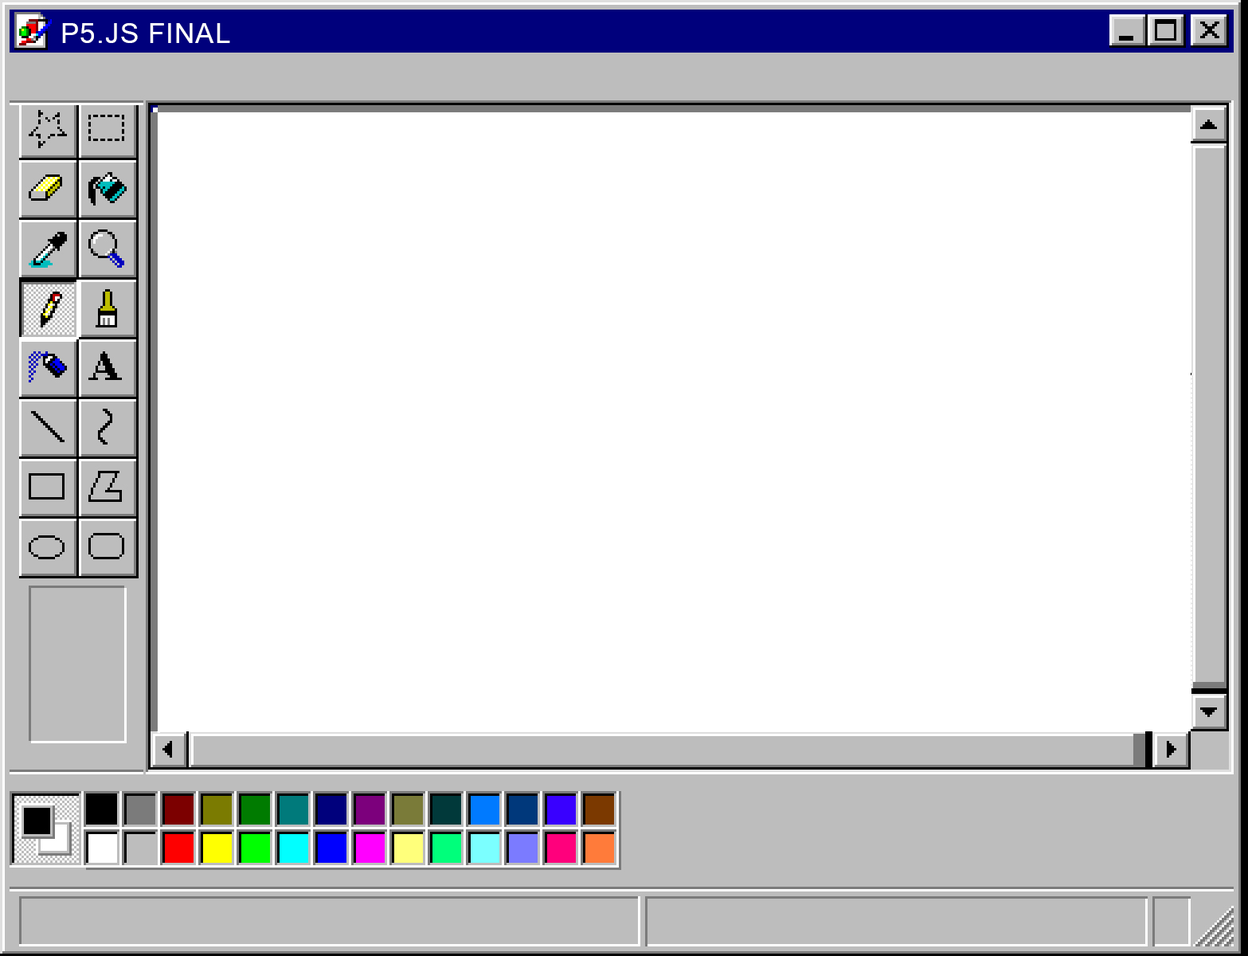
<style>
.page{position:relative;width:1248px;height:956px;background:#ffffff}
.page>*{position:absolute;margin:0}
.t1{font:26.9px "MicrosoftSansSerif";letter-spacing:0.04em;color:#ffffff;text-transform:uppercase}
</style>
<div class="page">
<p class="t1" style="left:62px;top:23px;width:168px;height:20px">P5.JS Final</p>
</div>
